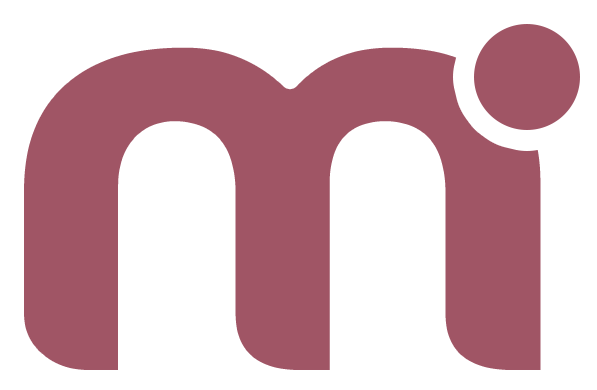
<style>
.page{position:relative;width:597px;height:390px;background:#ffffff}
.page>*{position:absolute;margin:0}
.t1{font:725.8px "NizarCoconKurdish-Bold";letter-spacing:-0.12em;color:#a05565;scale:1.13 1}
</style>
<div class="page">
<p class="t1" style="left:16px;top:39px;width:533px;height:339px">m</p>
</div>
